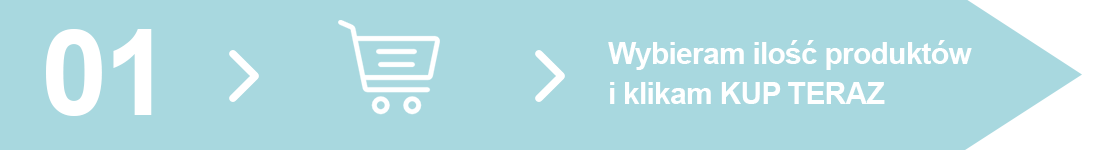
<style>
.page{position:relative;width:1100px;height:150px;background:#a8d8df}
.page>*{position:absolute;margin:0}
.t1{font:120px "Arial-BoldMT";letter-spacing:-0.025em;color:#ffffff}
.t2{font:30px/10px "Arial-BoldMT";letter-spacing:-0.025em;color:#ffffff}
</style>
<div class="page">
<p class="t1" style="left:46px;top:29px;width:106px;height:87px">01</p>
<p class="t2" style="left:608px;top:40px;width:364px;height:64px">Wybieram ilość produktów<br><br><br><br>i klikam KUP TERAZ</p>
</div>
